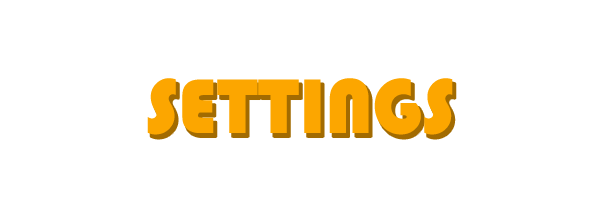
<style>
.page{position:relative;width:600px;height:200px;background:#ffffff}
.page>*{position:absolute;margin:0}
.t1{font:80px "Bauhaus93";color:#fca600}
</style>
<div class="page">
<p class="t1" style="left:147px;top:78px;width:306px;height:57px">SETTINGS</p>
</div>
